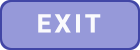
<style>
.page{position:relative;width:140px;height:50px;background:#9699d9}
.page>*{position:absolute;margin:0}
.t1{font:25.6px "Roboto-Bold";letter-spacing:0.133em;color:#f2f2f2}
</style>
<div class="page">
<p class="t1" style="left:38px;top:14px;width:63px;height:19px">EXIT</p>
</div>
